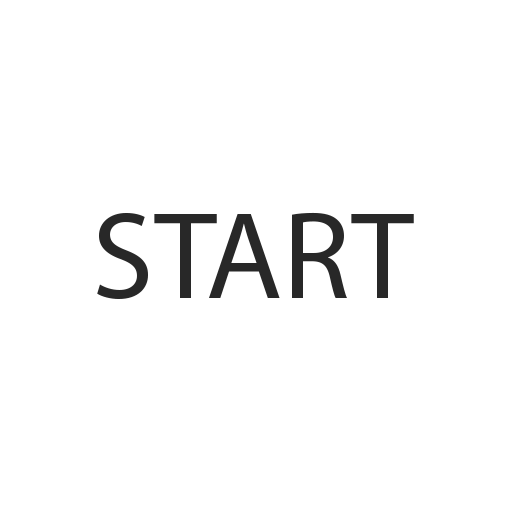
<style>
.page{position:relative;width:512px;height:512px;background:#ffffff}
.page>*{position:absolute;margin:0}
.t1{font:125px "MyriadPro-Regular";color:#282828}
</style>
<div class="page">
<p class="t1" style="left:97px;top:212px;width:317px;height:87px">START</p>
</div>
